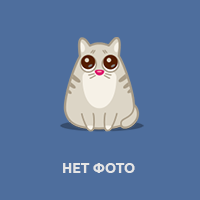
<style>
.page{position:relative;width:200px;height:200px;background:#4e6e9d}
.page>*{position:absolute;margin:0}
.t1{font:14px "Ubuntu-Bold";color:#e5e5e5}
</style>
<div class="page">
<p class="t1" style="left:63px;top:163px;width:72px;height:10px">НЕТ ФОТО</p>
</div>
